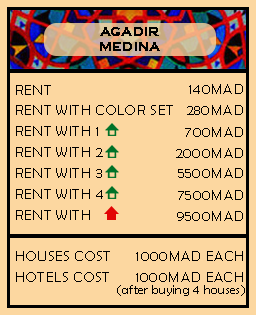
<style>
.page{position:relative;width:256px;height:315px;background:#fcd7a0}
.page>*{position:absolute;margin:0}
.t1{font:12.5px "CopperplateGothic-Bold";letter-spacing:0.025em;color:#000000}
.t2{font:14.6px/20.8px "BerlinSansFB-Reg";letter-spacing:0.025em;color:#000000}
.t3{font:14.6px "BerlinSansFB-Reg";letter-spacing:0.025em;color:#000000}
.t4{font:12.5px "BerlinSansFB-Reg";letter-spacing:0.025em;color:#000000}
</style>
<div class="page">
<p class="t1" style="left:100px;top:27px;width:60px;height:24px;text-align:center">AGADIR<br>MEDINA</p>
<p class="t2" style="left:16px;top:85px;width:157px;height:197px">RENT                                <br>RENT WITH COLOR SET    <br>RENT WITH 1                    <br>RENT WITH 2                   <br>RENT WITH 3                  <br>RENT WITH 4                 <br>RENT WITH                    <br><br>HOUSES COST      <br>HOTELS COST</p>
<p class="t3" style="left:189px;top:84px;width:54px;height:10px">140MAD</p>
<p class="t3" style="left:187px;top:105px;width:56px;height:10px">280MAD</p>
<p class="t3" style="left:185px;top:127px;width:58px;height:10px">700MAD</p>
<p class="t3" style="left:176px;top:148px;width:67px;height:10px">2000MAD</p>
<p class="t3" style="left:178px;top:168px;width:65px;height:10px">5500MAD</p>
<p class="t3" style="left:178px;top:190px;width:65px;height:10px">7500MAD</p>
<p class="t3" style="left:177px;top:211px;width:66px;height:10px">9500MAD</p>
<p class="t3" style="left:136px;top:251px;width:107px;height:10px">1000MAD EACH</p>
<p class="t3" style="left:136px;top:272px;width:107px;height:10px">1000MAD EACH</p>
<p class="t4" style="left:117px;top:285px;width:128px;height:11px">(after buying 4 houses)</p>
</div>
